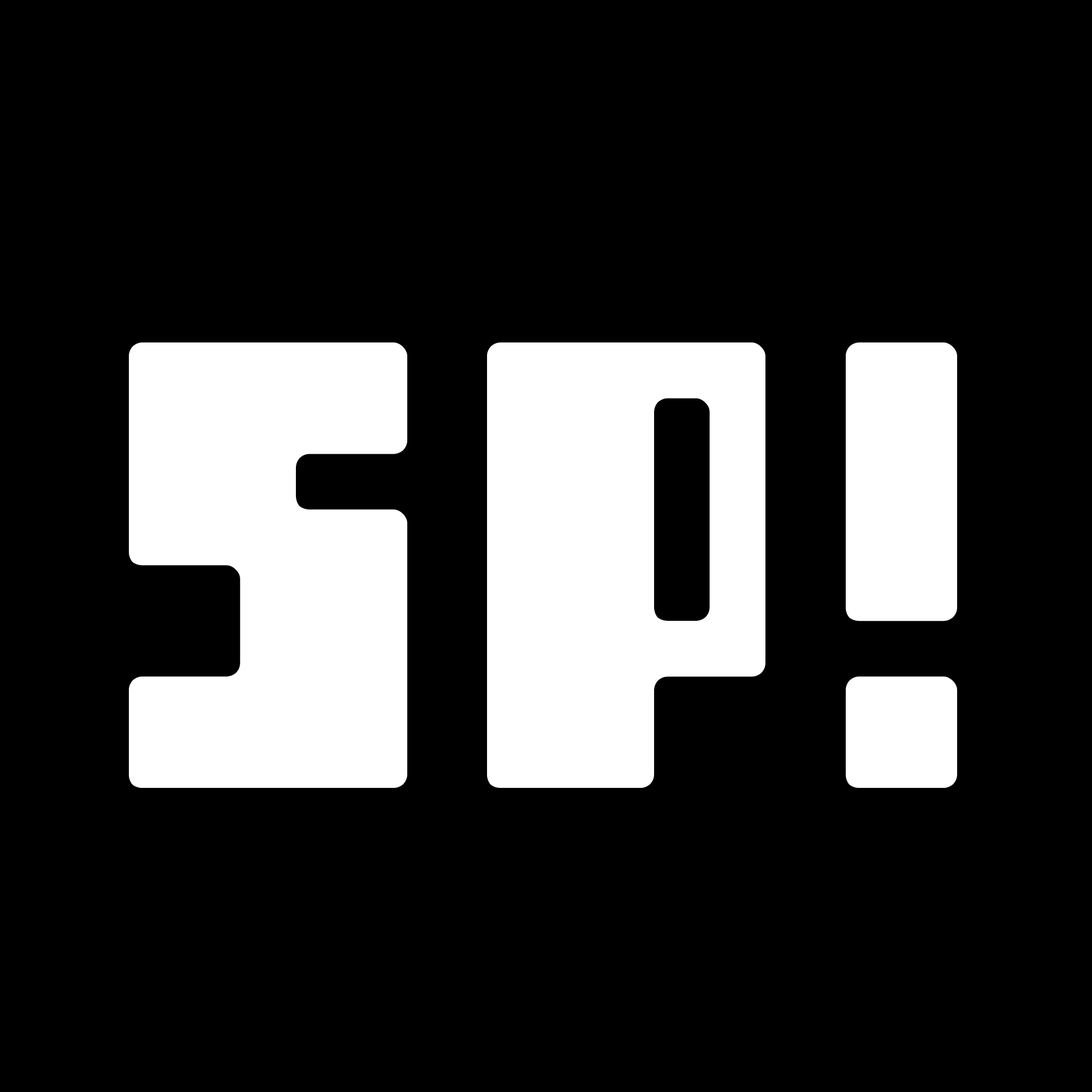
<style>
.page{position:relative;width:1092px;height:1092px;background:#000000}
.page>*{position:absolute;margin:0}
.t1{font:890.7px "Retro";color:#ffffff}
</style>
<div class="page">
<p class="t1" style="left:129px;top:342px;width:828px;height:446px">SP!</p>
</div>
